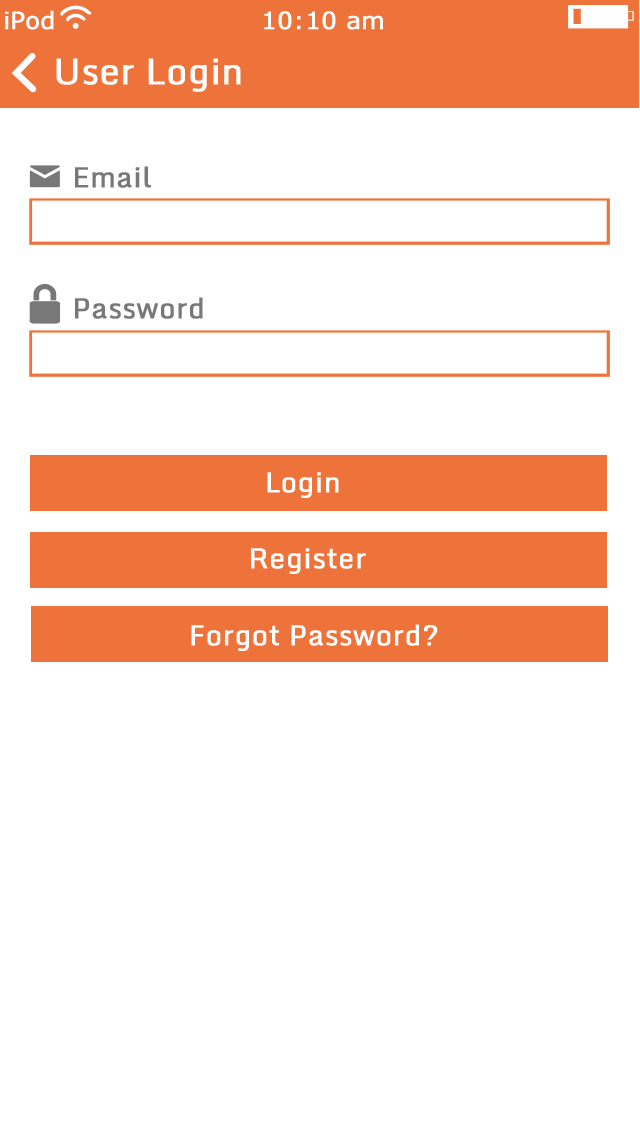
<style>
.page{position:relative;width:640px;height:1136px;background:#ffffff}
.page>*{position:absolute;margin:0}
.t1{font:28px "Monda-Regular";color:#787878;font-weight:bold}
.t2{font:28px "Monda-Regular";color:#ffffff;font-weight:bold}
</style>
<div class="page">
<p class="t1" style="left:75px;top:166px;width:76px;height:22px">Email</p>
<p class="t1" style="left:75px;top:297px;width:128px;height:22px">Password</p>
<p class="t2" style="left:267px;top:472px;width:72px;height:26px">Login</p>
<p class="t2" style="left:251px;top:548px;width:115px;height:26px">Register</p>
<p class="t2" style="left:191px;top:624px;width:247px;height:27px">Forgot Password?</p>
</div>
